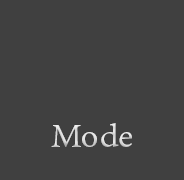
<style>
.page{position:relative;width:184px;height:180px;background:#404040}
.page>*{position:absolute;margin:0}
.t1{font:36px "AdobeDevanagari-Regular";color:#e6e6e6;scale:1.05 1}
</style>
<div class="page">
<p class="t1" style="left:51px;top:123px;width:81px;height:24px">Mode</p>
</div>
